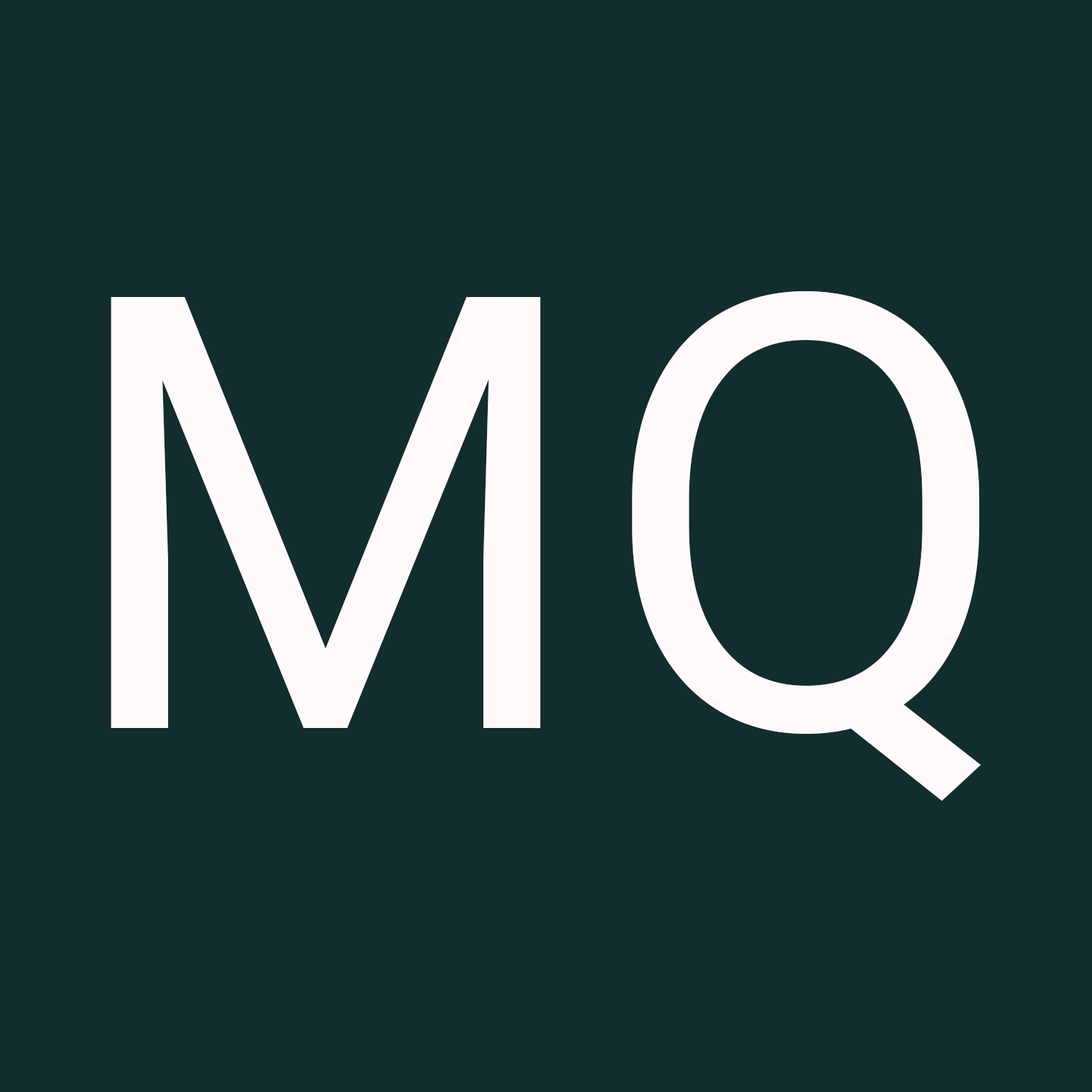
<style>
.page{position:relative;width:1092px;height:1092px;background:#112d2d}
.page>*{position:absolute;margin:0}
.t1{font:606.7px "Roboto-Regular";letter-spacing:0.015em;color:#fff9f9}
</style>
<div class="page">
<p class="t1" style="left:111px;top:291px;width:870px;height:510px">MQ</p>
</div>
